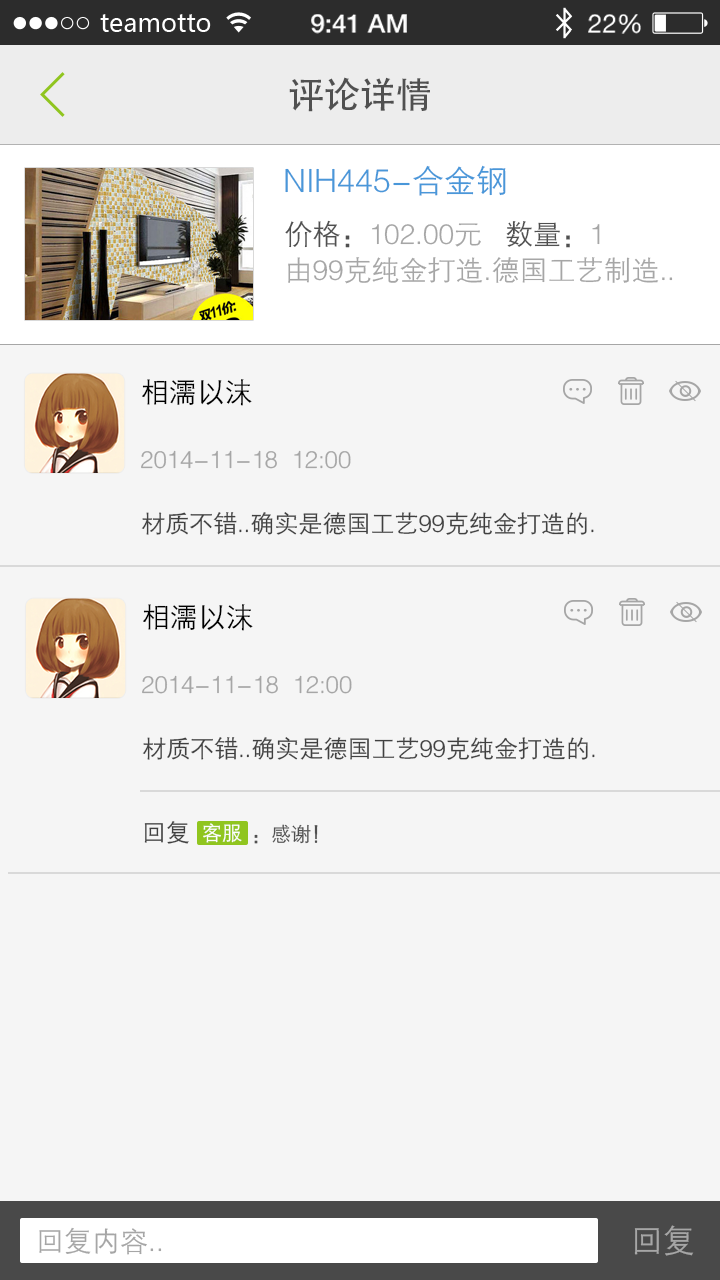
<style>
.page{position:relative;width:720px;height:1280px;background:#f5f5f5}
.page>*{position:absolute;margin:0}
.t1{font:36px "AdobeHeitiStd-Regular";color:#505050}
.t2{font:32px "FZZDXJW--GB1-0";color:#4997d9}
.t3{font:28px "FZZDXJW--GB1-0";color:#a6a6a6}
.t4{font:28px/36px "FZZDXJW--GB1-0";color:#505050}
.t5{font:28px/36px "FZZDXJW--GB1-0";color:#a6a6a6}
.t6{font:28px "FZZDXJW--GB1-0";color:#000000}
.t7{font:24px "FZZDXJW--GB1-0";color:#a6a6a6}
.t8{font:24px "FZZDXJW--GB1-0";color:#404040}
.t9{font:20px "FZZDXJW--GB1-0";color:#505050}
.t10{font:20px "FZZDXJW--GB1-0";color:#fefefe}
.t11{font:32px "FZZDXJW--GB1-0";color:#a6a6a6}
</style>
<div class="page">
<p class="t1" style="left:289px;top:77px;width:141px;height:35px">评论详情</p>
<p class="t2" style="left:285px;top:165px;width:221px;height:31px">NIH445-合金钢</p>
<p class="t3" style="left:285px;top:220px;width:388px;height:64px"><span class="t4">价格：</span><span class="t5">102.00元   </span><span class="t4">数量：</span><span class="t5">1<br></span>由99克纯金打造.德国工艺制造..</p>
<p class="t6" style="left:142px;top:379px;width:110px;height:27px">相濡以沫</p>
<p class="t7" style="left:141px;top:450px;width:210px;height:19px">2014-11-18  12:00</p>
<p class="t8" style="left:141px;top:512px;width:453px;height:23px">材质不错..确实是德国工艺99克纯金打造的.</p>
<p class="t6" style="left:143px;top:604px;width:110px;height:27px">相濡以沫</p>
<p class="t7" style="left:142px;top:675px;width:210px;height:19px">2014-11-18  12:00</p>
<p class="t8" style="left:142px;top:737px;width:453px;height:23px">材质不错..确实是德国工艺99克纯金打造的.</p>
<p class="t9" style="left:144px;top:821px;width:174px;height:23px"><span class="t8">回复           </span>：感谢！</p>
<p class="t10" style="left:203px;top:823px;width:39px;height:20px">客服</p>
<p class="t3" style="left:39px;top:1227px;width:123px;height:28px">回复内容..</p>
<p class="t11" style="left:634px;top:1225px;width:60px;height:31px">回复</p>
</div>
